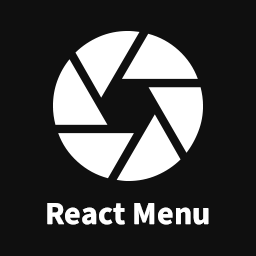
<style>
.page{position:relative;width:256px;height:256px;background:#0f0f0f}
.page>*{position:absolute;margin:0}
.t1{font:32px "SourceSansRoman-Bold";letter-spacing:0.01em;color:#ffffff}
</style>
<div class="page">
<p class="t1" style="left:47px;top:203px;width:162px;height:22px">React Menu</p>
</div>
